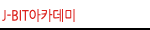
<style>
.page{position:relative;width:150px;height:30px;background:#ffffff}
.page>*{position:absolute;margin:0}
.t1{font:14px "NanumGothic";color:#dc241f;scale:0.9 1}
</style>
<div class="page">
<p class="t1" style="left:2px;top:9px;width:73px;height:13px">J-BIT아카데미</p>
</div>
